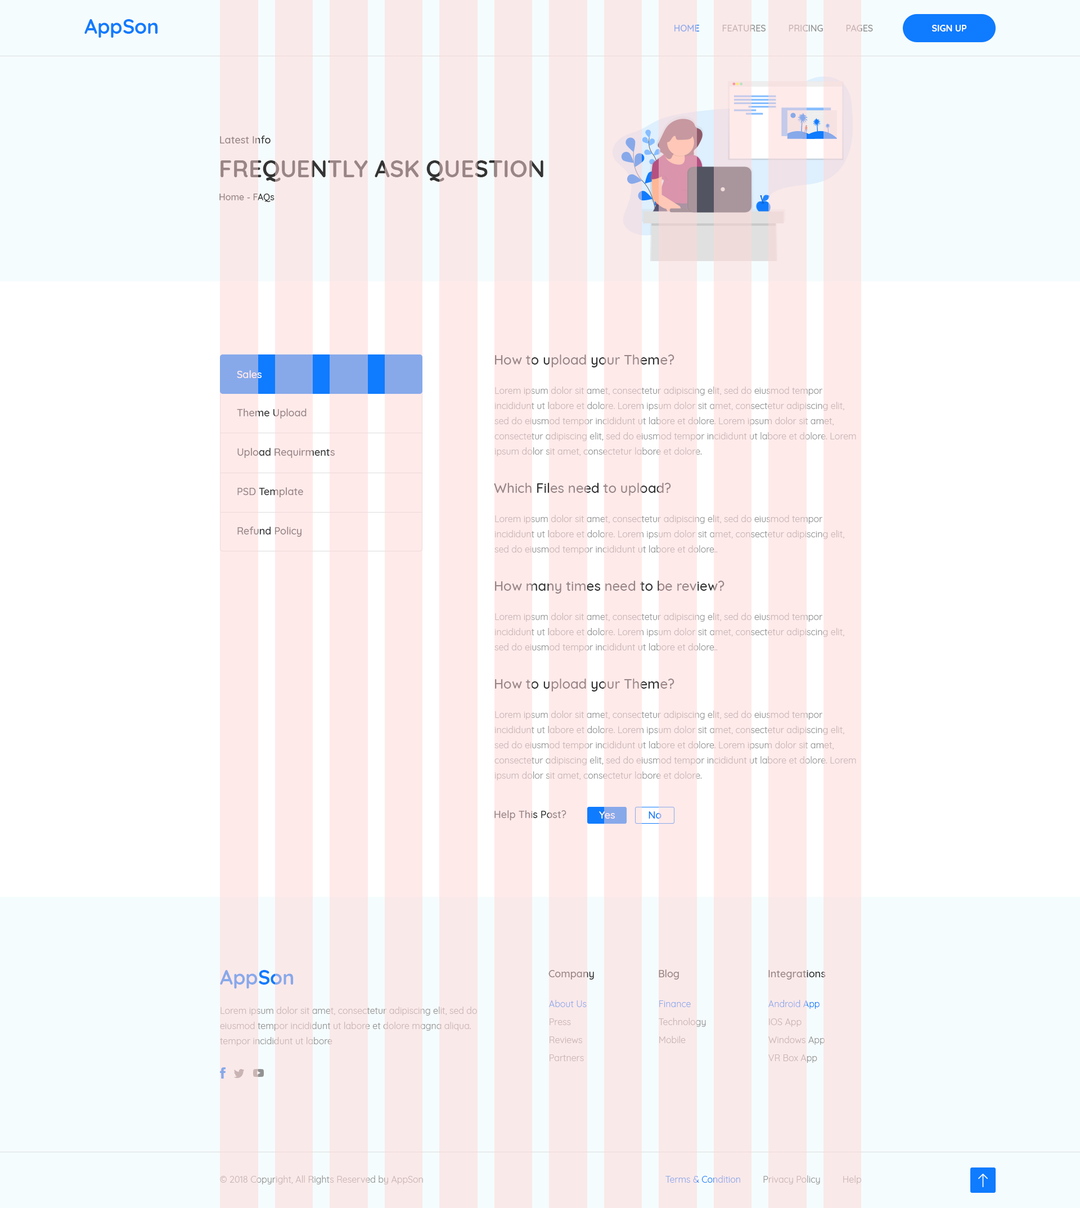
<style>
.page{position:relative;width:1080px;height:1208px;background:#ffffff}
.page>*{position:absolute;margin:0}
.t1{font:20.2px "Quicksand-Bold";color:#0f7bff}
.t2{font:9px "Quicksand-Medium";text-transform:uppercase}
.t3{font:9px "Quicksand-Bold";color:#ffffff}
.t4{font:10.1px "Quicksand-Medium";color:#998585}
.t5{font:23.6px "Quicksand-Bold";color:#998585;text-transform:uppercase}
.t6{font:9px "Quicksand-Medium"}
.t7{font:13.5px "Quicksand-Medium"}
.t8{font:10.1px "Quicksand-Medium";color:#ffffff}
.t9{font:9px/15.2px "Quicksand-Regular";color:#c9b4b4}
.t10{font:10.1px "Quicksand-Medium"}
.t11{font:13.5px "Quicksand-Medium";color:#998585}
.t12{font:9px/15.2px "Quicksand-Regular"}
.t13{font:10.1px "Quicksand-Medium";color:#0f7bff}
.t14{font:20.2px "Quicksand-Bold";color:#87a9ea}
.t15{font:9px "Quicksand-Regular";color:#87a9ea}
.t16{font:9px "Quicksand-Regular"}
.t17{font:9px "Quicksand-Regular";color:#c9b4b4}
</style>
<div class="page">
<p class="t1" style="left:84px;top:19px;width:74px;height:19px">AppSon</p>
<p class="t2" style="left:674px;top:25px;width:199px;height:7px">Home         Features         Pricing         Pages</p>
<p class="t3" style="left:932px;top:25px;width:35px;height:7px">SIGN UP</p>
<p class="t4" style="left:220px;top:136px;width:51px;height:7px">Latest Info</p>
<p class="t5" style="left:220px;top:160px;width:323px;height:22px">frequently Ask question</p>
<p class="t6" style="left:219px;top:194px;width:55px;height:8px">Home - FAQs</p>
<p class="t7" style="left:495px;top:354px;width:179px;height:13px">How to upload your Theme?</p>
<p class="t8" style="left:237px;top:370px;width:25px;height:8px">Sales</p>
<p class="t9" style="left:494px;top:386px;width:362px;height:70px">Lorem ipsum dolor sit amet, consectetur adipiscing elit, sed do eiusmod tempor incididunt ut labore et dolore. Lorem ipsum dolor sit amet, consectetur adipiscing elit, sed do eiusmod tempor incididunt ut labore et dolore. Lorem ipsum dolor sit amet, consectetur adipiscing elit, sed do eiusmod tempor incididunt ut labore et dolore. Lorem ipsum dolor sit amet, consectetur labore et dolore.</p>
<p class="t4" style="left:237px;top:408px;width:70px;height:10px">Theme Upload</p>
<p class="t10" style="left:237px;top:448px;width:98px;height:10px">Upload Requirments</p>
<p class="t11" style="left:494px;top:483px;width:177px;height:13px">Which Files need to upload?</p>
<p class="t4" style="left:237px;top:487px;width:66px;height:10px">PSD Template</p>
<p class="t12" style="left:494px;top:515px;width:350px;height:39px">Lorem ipsum dolor sit amet, consectetur adipiscing elit, sed do eiusmod tempor incididunt ut labore et dolore. Lorem ipsum dolor sit amet, consectetur adipiscing elit, sed do eiusmod tempor incididunt ut labore et dolore..</p>
<p class="t4" style="left:237px;top:526px;width:65px;height:11px">Refund Policy</p>
<p class="t11" style="left:495px;top:580px;width:229px;height:13px">How many times need to be review?</p>
<p class="t12" style="left:494px;top:613px;width:350px;height:39px">Lorem ipsum dolor sit amet, consectetur adipiscing elit, sed do eiusmod tempor incididunt ut labore et dolore. Lorem ipsum dolor sit amet, consectetur adipiscing elit, sed do eiusmod tempor incididunt ut labore et dolore..</p>
<p class="t7" style="left:495px;top:678px;width:179px;height:13px">How to upload your Theme?</p>
<p class="t9" style="left:494px;top:710px;width:362px;height:70px">Lorem ipsum dolor sit amet, consectetur adipiscing elit, sed do eiusmod tempor incididunt ut labore et dolore. Lorem ipsum dolor sit amet, consectetur adipiscing elit, sed do eiusmod tempor incididunt ut labore et dolore. Lorem ipsum dolor sit amet, consectetur adipiscing elit, sed do eiusmod tempor incididunt ut labore et dolore. Lorem ipsum dolor sit amet, consectetur labore et dolore.</p>
<p class="t4" style="left:494px;top:810px;width:72px;height:10px">Help This Post?</p>
<p class="t8" style="left:599px;top:811px;width:16px;height:7px">Yes</p>
<p class="t13" style="left:649px;top:811px;width:13px;height:7px">No</p>
<p class="t14" style="left:220px;top:970px;width:74px;height:18px">AppSon</p>
<p class="t4" style="left:548px;top:970px;width:46px;height:9px">Company</p>
<p class="t4" style="left:659px;top:969px;width:20px;height:10px">Blog</p>
<p class="t4" style="left:768px;top:970px;width:58px;height:9px">Integrations</p>
<p class="t15" style="left:549px;top:1000px;width:38px;height:7px">About Us</p>
<p class="t15" style="left:659px;top:1000px;width:32px;height:7px">Finance</p>
<p class="t16" style="left:768px;top:1000px;width:52px;height:9px">Android App</p>
<p class="t12" style="left:220px;top:1006px;width:257px;height:40px">Lorem ipsum dolor sit amet, consectetur adipiscing elit, sed do eiusmod tempor incididunt ut labore et dolore magna aliqua. tempor incididunt ut labore</p>
<p class="t17" style="left:550px;top:1018px;width:21px;height:7px">Press</p>
<p class="t17" style="left:659px;top:1018px;width:47px;height:9px">Technology</p>
<p class="t17" style="left:769px;top:1018px;width:33px;height:9px">IOS App</p>
<p class="t17" style="left:550px;top:1036px;width:32px;height:7px">Reviews</p>
<p class="t17" style="left:659px;top:1036px;width:27px;height:7px">Mobile</p>
<p class="t16" style="left:768px;top:1036px;width:57px;height:9px">Windows App</p>
<p class="t17" style="left:550px;top:1054px;width:34px;height:7px">Partners</p>
<p class="t17" style="left:768px;top:1054px;width:49px;height:9px">VR Box App</p>
<p class="t17" style="left:220px;top:1175px;width:203px;height:9px">© 2018 Copyright, All Rights Reserved by AppSon</p>
<p class="t16" style="left:665px;top:1175px;width:196px;height:9px">Terms &amp; Condition         Privacy Policy         Help</p>
</div>
